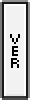
<style>
.page{position:relative;width:30px;height:100px;background:#f2f2f2}
.page>*{position:absolute;margin:0}
.t1{font:10px "Pixel";letter-spacing:0.005em;color:#000000}
</style>
<div class="page">
<p class="t1" style="left:10px;top:34px;width:10px;height:34px;text-align:center">v<br>e<br>r</p>
</div>
